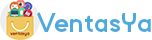
<style>
.page{position:relative;width:152px;height:40px;background:#ffffff}
.page>*{position:absolute;margin:0}
.t1{font:25px "Mockup-Bold";color:#4dabdb}
</style>
<div class="page">
<p class="t1" style="left:37px;top:12px;width:114px;height:20px">VentasYa</p>
</div>
